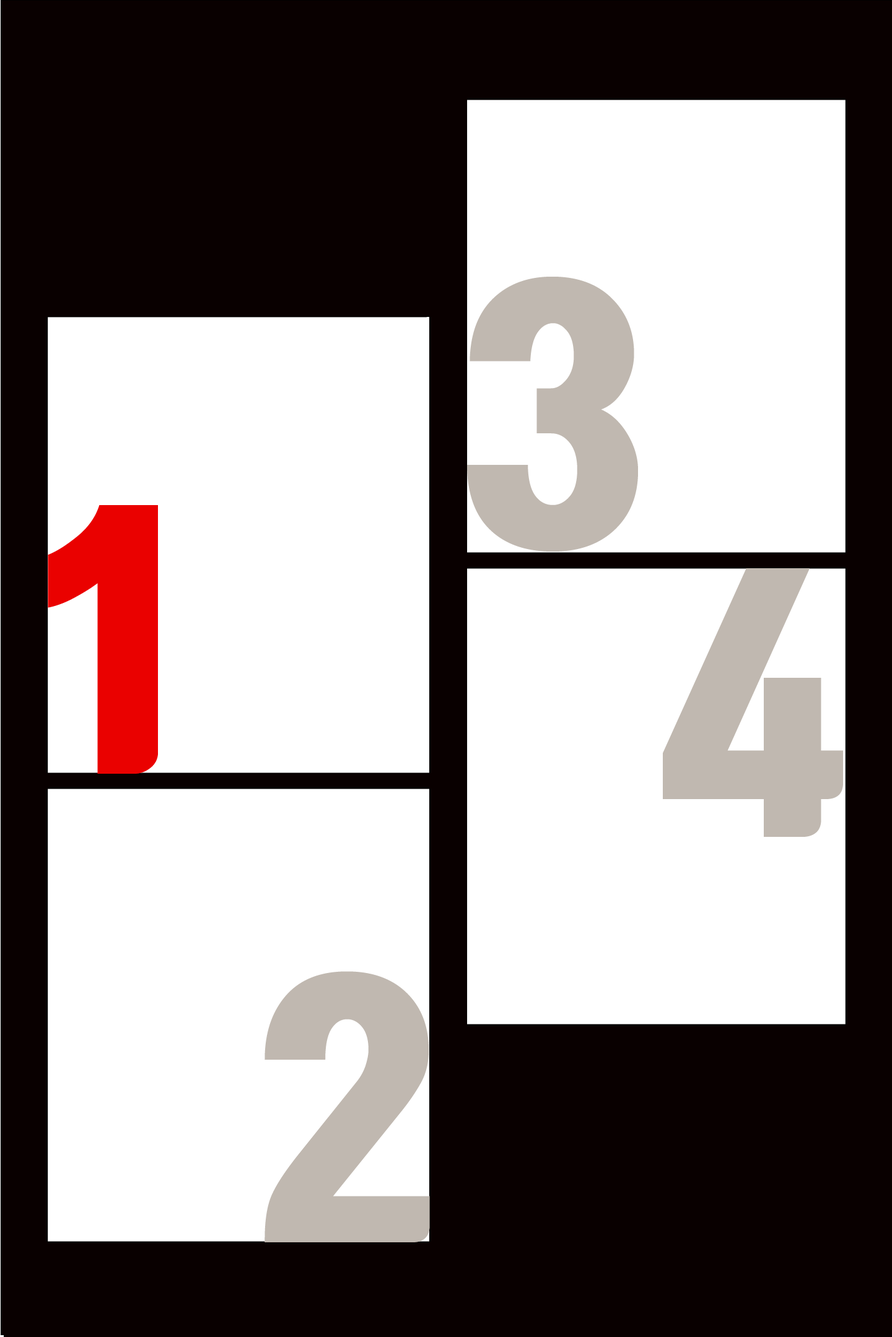
<style>
.page{position:relative;width:892px;height:1337px;background:#ffffff}
.page>*{position:absolute;margin:0}
.t1{font:309.6px "TmonMonsoriBlack";color:#c0b8b0;text-transform:uppercase}
.t2{font:309.6px "TmonMonsoriBlack";color:#ea0100;text-transform:uppercase}
</style>
<div class="page">
<p class="t1" style="left:467px;top:277px;width:171px;height:275px">3</p>
<p class="t2" style="left:48px;top:505px;width:110px;height:269px">1</p>
<p class="t1" style="left:663px;top:568px;width:180px;height:269px">4</p>
<p class="t1" style="left:264px;top:971px;width:166px;height:272px">2</p>
</div>
